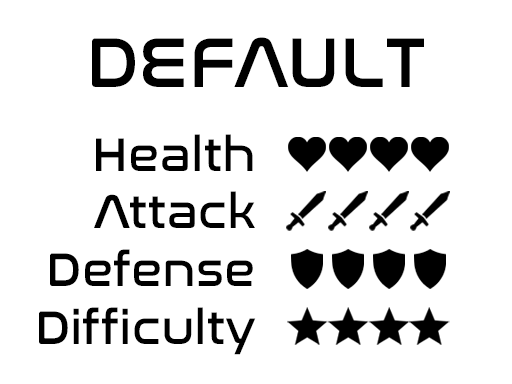
<style>
.page{position:relative;width:512px;height:384px;background:#ffffff}
.page>*{position:absolute;margin:0}
.t1{font:72px "NasalizationRg-Regular";color:#000000}
.t2{font:48px "NasalizationRg-Regular";color:#000000}
</style>
<div class="page">
<p class="t1" style="left:92px;top:37px;width:332px;height:50px">DEFAULT</p>
<p class="t2" style="left:39px;top:134px;width:217px;height:221px;text-align:right">Health<br>Attack<br>Defense<br>Difficulty</p>
</div>
